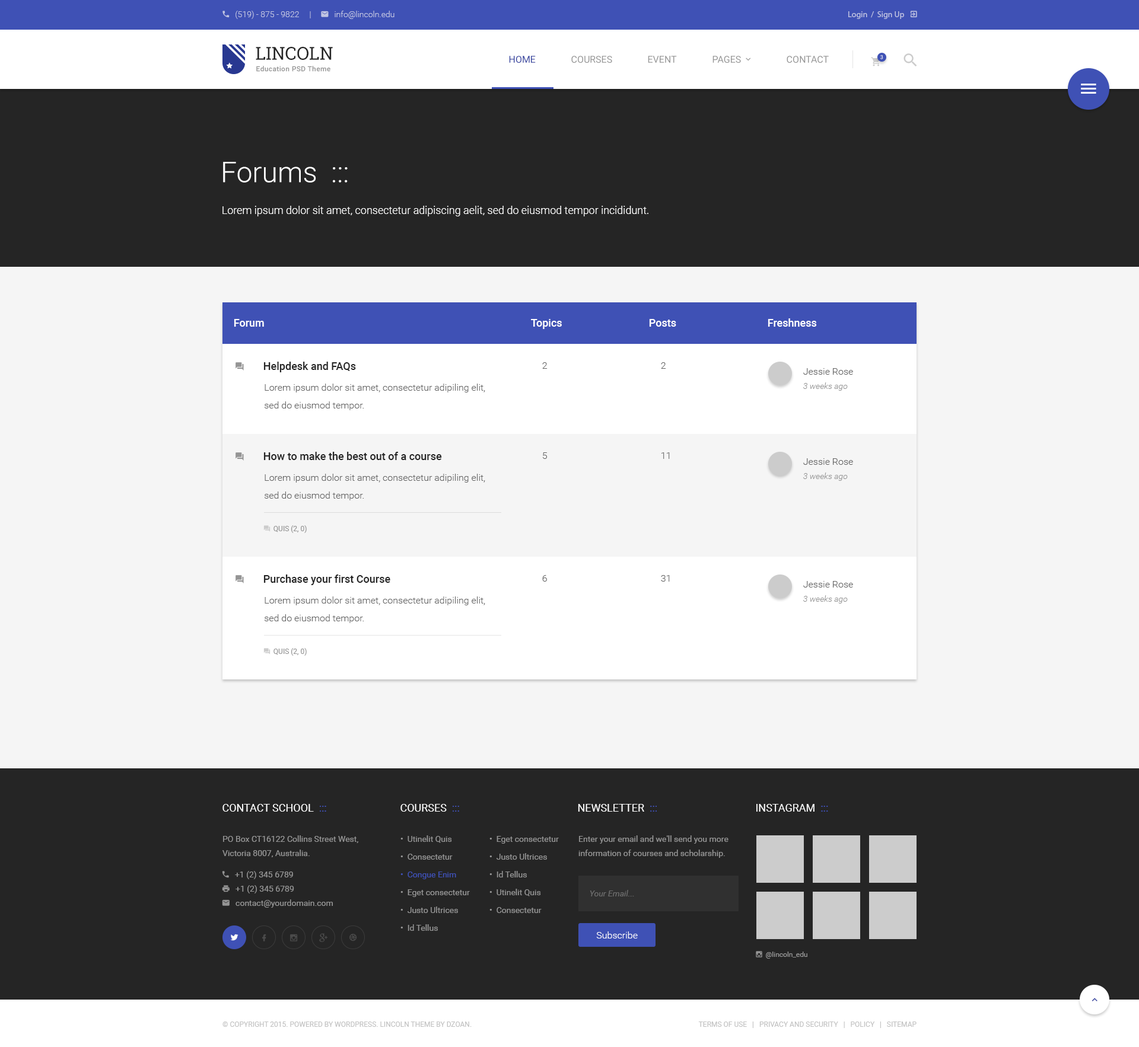
<style>
.page{position:relative;width:1139px;height:1047px;background:#252525}
.page>*{position:absolute;margin:0}
.t1{font:17.8px "RobotoSlab-Regular";color:#252525;text-transform:uppercase}
.t2{font:7.1px "Roboto-Medium";letter-spacing:0.03em;color:#959595}
.t3{font:9.5px "Roboto-Regular";color:#303f9f;text-transform:uppercase}
.t4{font:9.5px "Roboto-Regular";color:#959595;text-transform:uppercase}
.t5{font:5.3px "Roboto-Regular";text-transform:uppercase}
.t6{font:28.5px "Roboto-Light";color:#ffffff}
.t7{font:10.7px "Roboto-Light";color:#ffffff}
.t8{font:10.7px "Roboto-Medium";color:#ffffff}
.t9{font:10.7px "Roboto-Medium";color:#252525}
.t10{font:9.5px "Roboto-Light";color:#636363}
.t11{font:9.5px/14.2px "Roboto-Light";color:#636363}
.t12{font:8.3px/14.2px "Roboto-LightItalic";color:#959595}
.t13{font:9.5px/17.8px "Roboto-Light";color:#636363}
.t14{font:10.7px "Roboto-Regular";color:#ffffff;text-transform:uppercase}
.t15{font:10.7px "Roboto-Regular";color:#3f51b5;text-transform:uppercase}
.t16{font:8.3px/17.8px "Roboto-Regular";color:#959595}
.t17{font:8.3px/17.8px "Roboto-Regular";color:#3f51b5}
.t18{font:8.3px/14.2px "Roboto-Regular";color:#959595}
.t19{font:8.3px "Roboto-Italic";color:#6c6c6c}
.t20{font:9.5px "Roboto-Light";color:#ffffff}
.t21{font:7.1px "Roboto-Regular";color:#c2c2c2;text-transform:uppercase}
</style>
<div class="page">
<p class="t1" style="left:256px;top:47px;width:77px;height:13px">Lincoln</p>
<p class="t2" style="left:256px;top:66px;width:74px;height:6px">Education PSD Theme</p>
<p class="t3" style="left:509px;top:56px;width:26px;height:7px">Home</p>
<p class="t4" style="left:571px;top:56px;width:41px;height:7px">Courses</p>
<p class="t4" style="left:648px;top:56px;width:29px;height:7px">Event</p>
<p class="t4" style="left:786px;top:56px;width:42px;height:7px">Contact</p>
<p class="t5" style="left:880px;top:55px;width:3px;height:4px">3</p>
<p class="t6" style="left:223px;top:162px;width:125px;height:21px">Forums  :::</p>
<p class="t7" style="left:222px;top:206px;width:426px;height:10px">Lorem ipsum dolor sit amet, consectetur adipiscing aelit, sed do eiusmod tempor incididunt.</p>
<p class="t8" style="left:234px;top:319px;width:30px;height:8px">Forum</p>
<p class="t8" style="left:531px;top:319px;width:31px;height:10px">Topics</p>
<p class="t8" style="left:649px;top:319px;width:27px;height:8px">Posts</p>
<p class="t8" style="left:767px;top:318px;width:50px;height:9px">Freshness</p>
<p class="t9" style="left:263px;top:362px;width:93px;height:10px">Helpdesk and FAQs</p>
<p class="t10" style="left:542px;top:362px;width:5px;height:7px">2</p>
<p class="t10" style="left:661px;top:362px;width:5px;height:7px">2</p>
<p class="t11" style="left:803px;top:368px;width:50px;height:23px">Jessie Rose<br><span class="t12">3 weeks ago</span></p>
<p class="t13" style="left:264px;top:384px;width:221px;height:26px">Lorem ipsum dolor sit amet, consectetur adipiling elit, sed do eiusmod tempor.</p>
<p class="t9" style="left:263px;top:452px;width:179px;height:8px">How to make the best out of a course</p>
<p class="t10" style="left:542px;top:452px;width:5px;height:7px">5</p>
<p class="t10" style="left:661px;top:452px;width:9px;height:7px">11</p>
<p class="t11" style="left:803px;top:458px;width:50px;height:23px">Jessie Rose<br><span class="t12">3 weeks ago</span></p>
<p class="t13" style="left:264px;top:474px;width:221px;height:27px">Lorem ipsum dolor sit amet, consectetur adipiling elit, sed do eiusmod tempor.</p>
<p class="t9" style="left:263px;top:575px;width:127px;height:10px">Purchase your first Course</p>
<p class="t10" style="left:542px;top:575px;width:5px;height:7px">6</p>
<p class="t10" style="left:661px;top:575px;width:9px;height:7px">31</p>
<p class="t11" style="left:803px;top:581px;width:50px;height:23px">Jessie Rose<br><span class="t12">3 weeks ago</span></p>
<p class="t13" style="left:264px;top:597px;width:221px;height:26px">Lorem ipsum dolor sit amet, consectetur adipiling elit, sed do eiusmod tempor.</p>
<p class="t14" style="left:222px;top:804px;width:104px;height:8px">Contact School  <span class="t15">:::</span></p>
<p class="t14" style="left:400px;top:804px;width:59px;height:8px">Courses  <span class="t15">:::</span></p>
<p class="t14" style="left:578px;top:804px;width:78px;height:8px">Newsletter  <span class="t15">:::</span></p>
<p class="t14" style="left:756px;top:804px;width:72px;height:8px">Instagram  <span class="t15">:::</span></p>
<p class="t16" style="left:400px;top:836px;width:70px;height:95px">•  Utinelit Quis<br>•  Consectetur<br><span class="t17">•  Congue Enim<br></span>•  Eget consectetur<br>•  Justo Ultrices<br>•  Id Tellus</p>
<p class="t16" style="left:489px;top:836px;width:70px;height:77px">•  Eget consectetur<br>•  Justo Ultrices<br>•  Id Tellus<br>•  Utinelit Quis<br>•  Consectetur</p>
<p class="t18" style="left:578px;top:836px;width:150px;height:22px">Enter your email and we'll send you more information of courses and scholarship.</p>
<p class="t19" style="left:589px;top:890px;width:45px;height:7px">Your Email...</p>
<p class="t20" style="left:596px;top:932px;width:41px;height:7px">Subscribe</p>
<p class="t21" style="left:222px;top:1022px;width:249px;height:5px">© Copyright 2015. Powered by WordPress. Lincoln Theme by DZOAN.</p>
<p class="t21" style="left:698px;top:1022px;width:218px;height:6px">Terms of Use   |   Privacy and Security   |   Policy   |   Sitemap</p>
</div>
